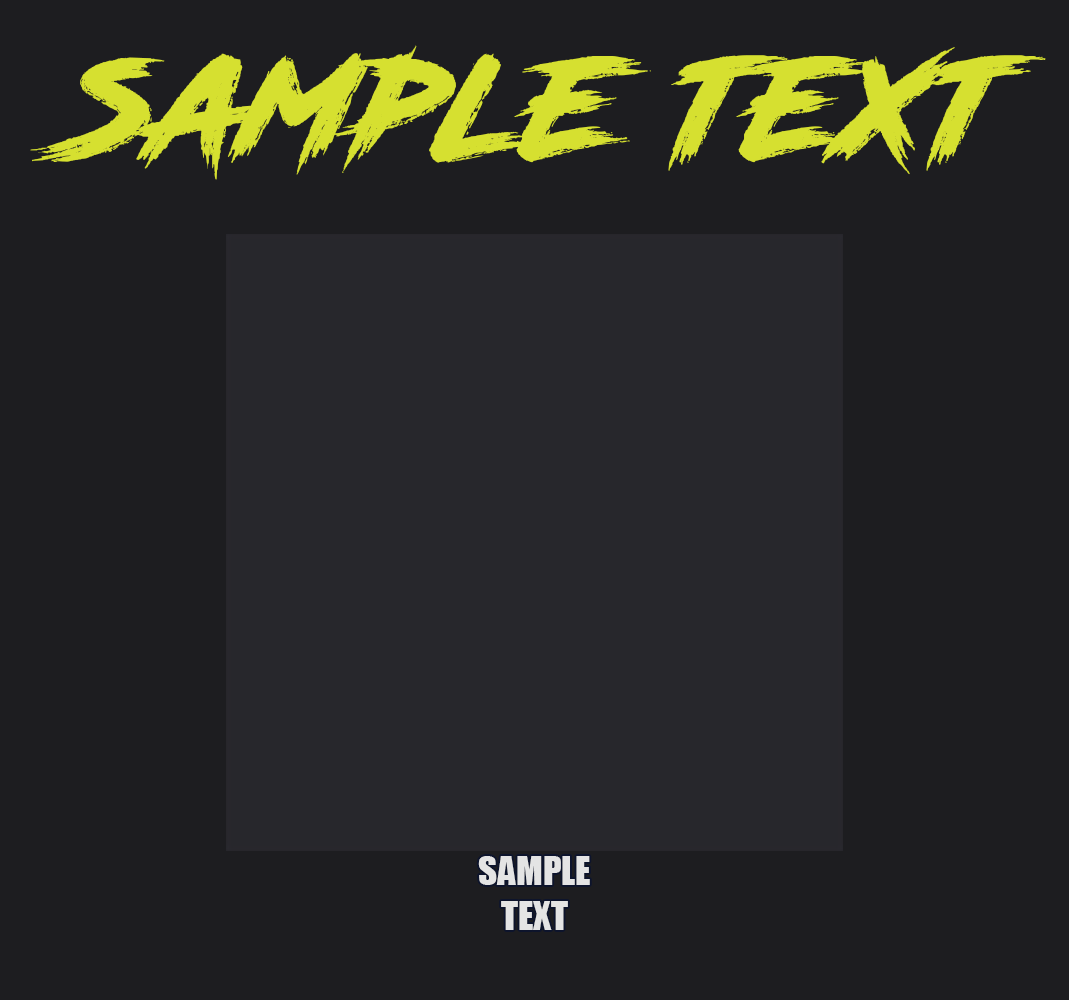
<style>
.page{position:relative;width:1069px;height:1000px;background:#1d1d20}
.page>*{position:absolute;margin:0}
.t1{font:145px "RoadRage";color:#d6e030}
.t2{font:37px "Impact";color:#e4e4e4}
</style>
<div class="page">
<p class="t1" style="left:30px;top:45px;width:1016px;height:135px">sample text</p>
<p class="t2" style="left:478px;top:856px;width:112px;height:74px;text-align:center">SAMPLE<br>TEXT</p>
</div>
